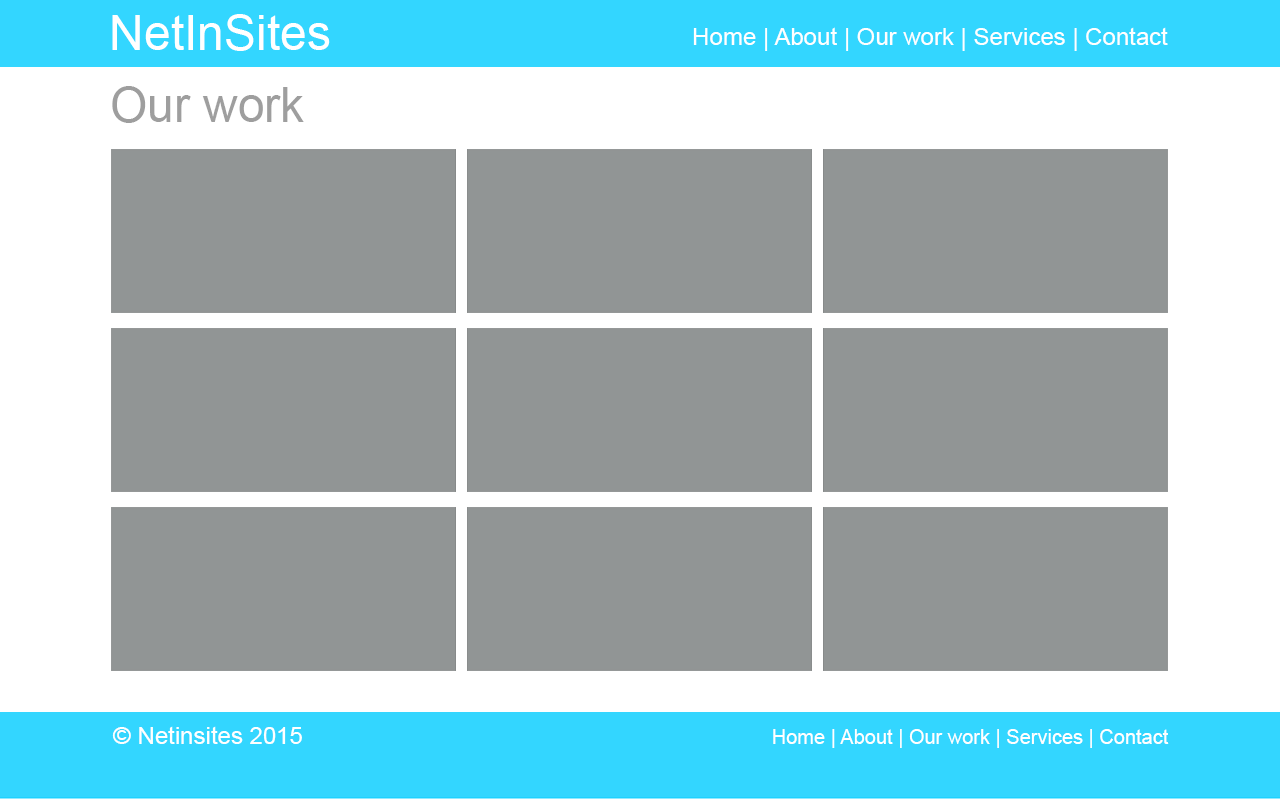
<style>
.page{position:relative;width:1280px;height:800px;background:#919595}
.page>*{position:absolute;margin:0}
.t1{font:48px "ArialMT";color:#ffffff}
.t2{font:24px "ArialMT";color:#ffffff}
.t3{font:48px "ArialMT";color:#9e9e9e}
.t4{font:20px "ArialMT";color:#ffffff}
</style>
<div class="page">
<p class="t1" style="left:112px;top:14px;width:218px;height:37px">NetInSites</p>
<p class="t2" style="left:693px;top:27px;width:475px;height:24px">Home | About | Our work | Services | Contact</p>
<p class="t3" style="left:112px;top:86px;width:192px;height:37px">Our work</p>
<p class="t2" style="left:112px;top:726px;width:190px;height:18px">© Netinsites 2015</p>
<p class="t4" style="left:773px;top:729px;width:396px;height:19px">Home | About | Our work | Services | Contact</p>
</div>
